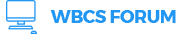
<style>
.page{position:relative;width:192px;height:34px;background:#ffffff}
.page>*{position:absolute;margin:0}
.t1{font:18px "Montserrat-Bold";letter-spacing:-0.025em;color:#2196f3;text-transform:uppercase}
</style>
<div class="page">
<p class="t1" style="left:50px;top:10px;width:126px;height:13px">WBCS FORUM</p>
</div>
